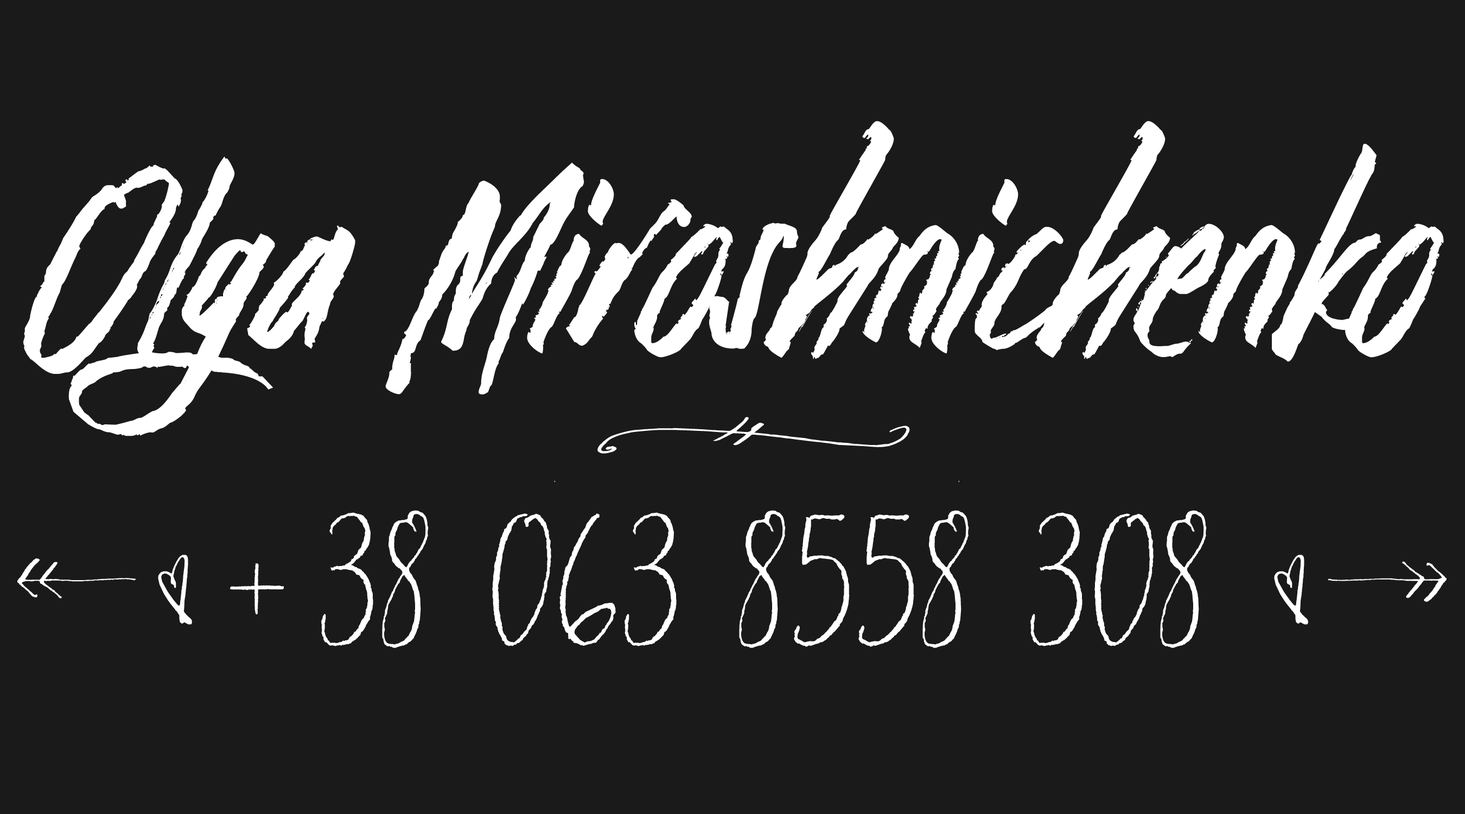
<style>
.page{position:relative;width:1465px;height:814px;background:#1a1a1a}
.page>*{position:absolute;margin:0}
.t1{font:310.1px "Goodfy";color:#ffffff}
.t2{font:229.7px "Hollyhock-Ornaments";color:#ffffff}
.t3{font:252.7px "Hollyhock";color:#ffffff}
.t4{font:252.7px "Hollyhock-Ornaments";color:#ffffff}
</style>
<div class="page">
<p class="t1" style="left:23px;top:121px;width:1421px;height:361px">Olga Miroshnichenko</p>
<p class="t2" style="left:597px;top:417px;width:313px;height:37px">a</p>
<p class="t3" style="left:321px;top:510px;width:886px;height:138px">38 063 8558 308</p>
<p class="t4" style="left:17px;top:555px;width:1430px;height:70px">iq<span class="t3">+                  </span>qj</p>
</div>
